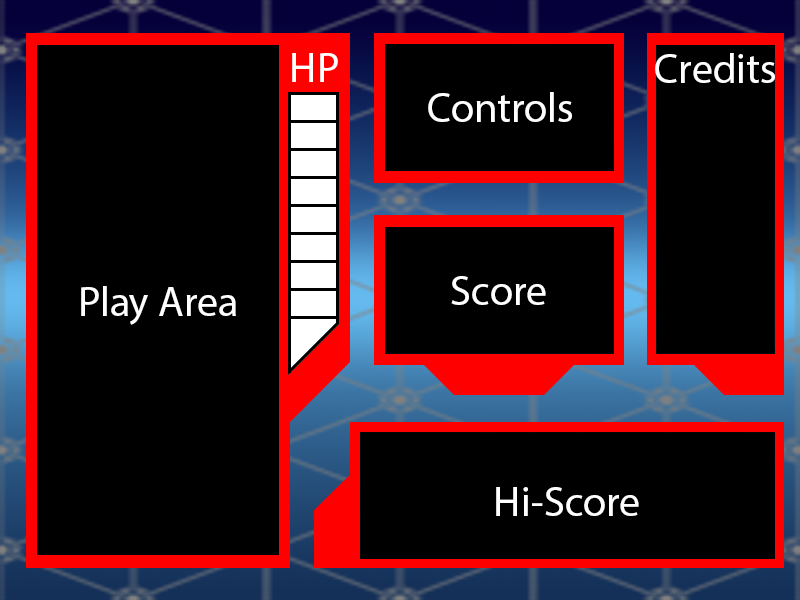
<style>
.page{position:relative;width:800px;height:600px;background:#000000}
.page>*{position:absolute;margin:0}
.t1{font:42px "MyriadPro-Regular";color:#ffffff}
</style>
<div class="page">
<p class="t1" style="left:292px;top:53px;width:46px;height:29px">HP</p>
<p class="t1" style="left:655px;top:53px;width:120px;height:30px">Credits</p>
<p class="t1" style="left:428px;top:92px;width:144px;height:30px">Controls</p>
<p class="t1" style="left:451px;top:276px;width:95px;height:29px">Score</p>
<p class="t1" style="left:81px;top:286px;width:155px;height:39px">Play Area</p>
<p class="t1" style="left:496px;top:487px;width:143px;height:29px">Hi-Score</p>
</div>
